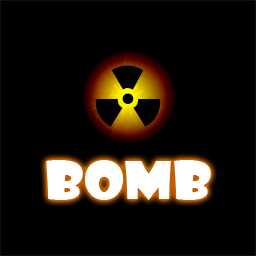
<style>
.page{position:relative;width:256px;height:256px;background:#000000}
.page>*{position:absolute;margin:0}
.t1{font:51px "ShowcardGothic-Reg";color:#ffffff;scale:1.14 1}
</style>
<div class="page">
<p class="t1" style="left:46px;top:160px;width:165px;height:40px">BOMB</p>
</div>
